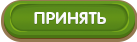
<style>
.page{position:relative;width:137px;height:42px}
.page>*{position:absolute;margin:0}
.t1{font:16px "RotondaC-Bold";letter-spacing:0.04em;color:#ffffff;text-transform:uppercase}
</style>
<div class="page">
<p class="t1" style="left:34px;top:12px;width:72px;height:12px">принять</p>
</div>
